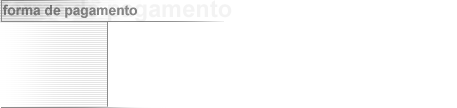
<style>
.page{position:relative;width:457px;height:108px;background:#ffffff}
.page>*{position:absolute;margin:0}
.t1{font:13.7px "Arial-BoldMT";color:#8a8a8a}
</style>
<div class="page">
<p class="t1" style="left:3px;top:4px;width:134px;height:14px">forma de pagamento</p>
</div>
